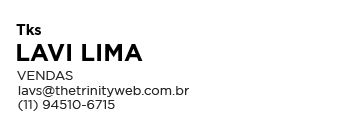
<style>
.page{position:relative;width:343px;height:120px;background:#ffffff}
.page>*{position:absolute;margin:0}
.t1{font:15px "GothamPro-Bold";color:#000000}
.t2{font:24px "GothamPro-Bold";color:#000000}
.t3{font:13px "Gotham-Book";color:#262626}
</style>
<div class="page">
<p class="t1" style="left:16px;top:24px;width:25px;height:11px">Tks</p>
<p class="t2" style="left:17px;top:44px;width:126px;height:17px">LAVI LIMA</p>
<p class="t3" style="left:17px;top:71px;width:56px;height:9px">VENDAS</p>
<p class="t3" style="left:18px;top:86px;width:171px;height:11px">lavs@thetrinityweb.com.br</p>
<p class="t3" style="left:18px;top:100px;width:97px;height:11px">(11) 94510-6715</p>
</div>
